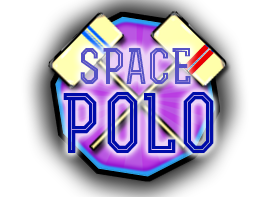
<style>
.page{position:relative;width:269px;height:197px;background:#ffffff}
.page>*{position:absolute;margin:0}
.t1{font:48px "RexBoldInline";color:#5652c6}
.t2{font:80px "RexBoldInline";color:#000ca9}
</style>
<div class="page">
<p class="t1" style="left:80px;top:48px;width:111px;height:36px">SPACE</p>
<p class="t2" style="left:63px;top:92px;width:151px;height:61px">POLO</p>
</div>
